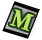
<style>
.page{position:relative;width:42px;height:40px;background:#ffffff}
.page>*{position:absolute;margin:0}
.t1{font:22px "RyuminPro-ExBold";color:#bbe463;font-weight:bold}
</style>
<div class="page">
<p class="t1" style="left:9px;top:9px;width:25px;height:22px;rotate:19deg">M</p>
</div>
